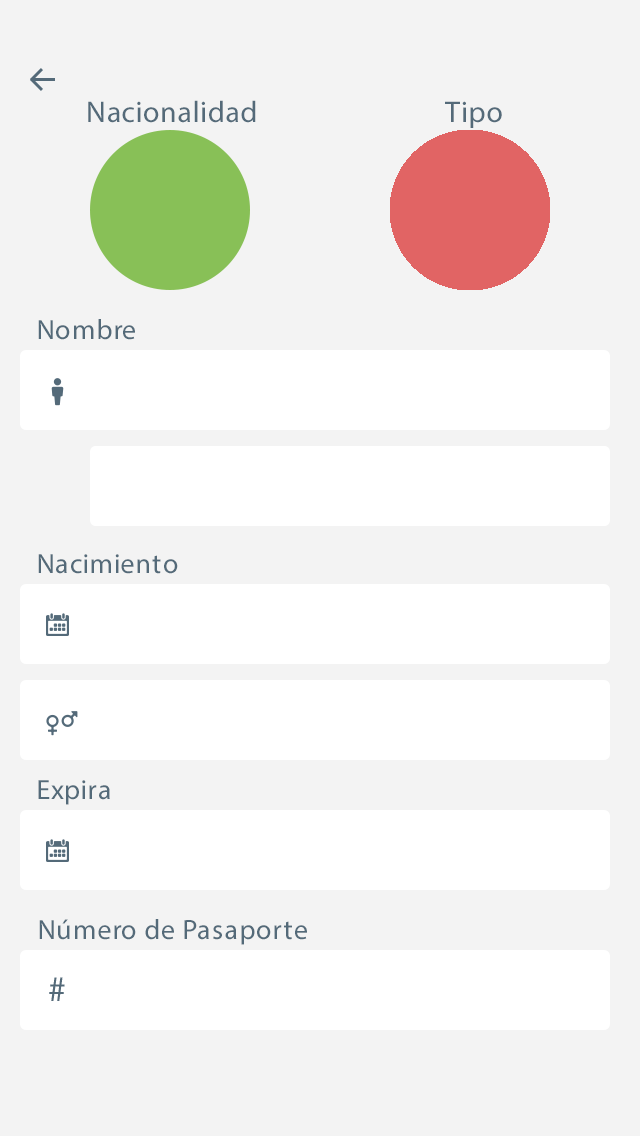
<style>
.page{position:relative;width:640px;height:1136px;background:#f3f3f3}
.page>*{position:absolute;margin:0}
.t1{font:30px "MyriadPro-Regular";letter-spacing:0.025em;color:#546a79}
.t2{font:28px "MyriadPro-Regular";letter-spacing:0.025em;color:#546a79}
</style>
<div class="page">
<p class="t1" style="left:88px;top:100px;width:414px;height:28px">Nacionalidad                   Tipo</p>
<p class="t2" style="left:38px;top:319px;width:97px;height:21px">Nombre</p>
<p class="t2" style="left:38px;top:554px;width:140px;height:20px">Nacimiento</p>
<p class="t2" style="left:38px;top:780px;width:72px;height:25px">Expira</p>
<p class="t2" style="left:39px;top:919px;width:268px;height:26px">Número de Pasaporte</p>
</div>
